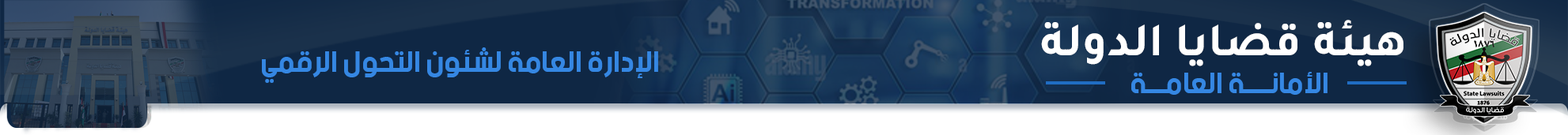
<style>
.page{position:relative;width:1568px;height:135px}
.page>*{position:absolute;margin:0}
.t1{font:47.7px "Tajawal-Bold";color:#ffffff}
.t2{font:30.8px "beINBlack";color:#3587e3}
</style>
<div class="page">
<p class="t1" style="left:1041px;top:20px;width:362px;height:46px">هيئة قضايا الدولة</p>
<p class="t2" style="left:262px;top:47px;width:396px;height:36px">الإدارة العامة لشئون التحول الرقمي</p>
<p class="t2" style="left:1131px;top:72px;width:196px;height:23px">الأمانــــة العامـــة</p>
</div>
